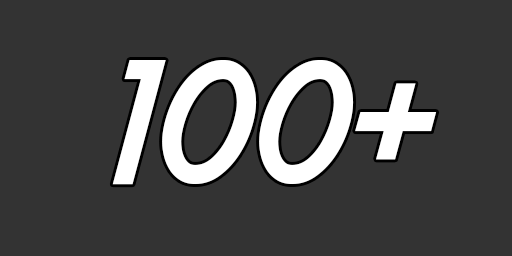
<style>
.page{position:relative;width:512px;height:256px;background:#333333}
.page>*{position:absolute;margin:0}
.t1{font:240px "AeroviasBrasilNF";color:#ffffff}
</style>
<div class="page">
<p class="t1" style="left:112px;top:60px;width:325px;height:125px">100+</p>
</div>
